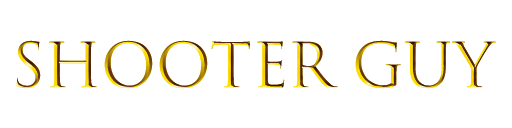
<style>
.page{position:relative;width:512px;height:128px;background:#ffffff}
.page>*{position:absolute;margin:0}
.t1{font:60px "TrajanColor-Concept"}
</style>
<div class="page">
<p class="t1" style="left:16px;top:40px;width:480px;height:49px">Shooter Guy</p>
</div>
